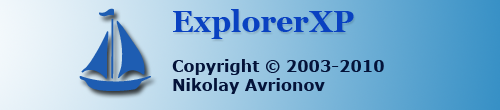
<style>
.page{position:relative;width:500px;height:110px}
.page>*{position:absolute;margin:0}
.t1{font:30px "SCByTheSea";color:#1e5db2}
.t2{font:30px "Georgia-Bold";color:#0941c1}
.t3{font:16px "Verdana-Bold";color:#041339}
</style>
<div class="page">
<p class="t1" style="left:79px;top:8px;width:72px;height:83px;text-align:right">t</p>
<p class="t2" style="left:173px;top:9px;width:181px;height:30px">ExplorerXP</p>
<p class="t3" style="left:172px;top:59px;width:212px;height:35px">Copyright © 2003-2010<br>Nikolay Avrionov</p>
</div>
